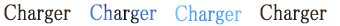
<style>
.page{position:relative;width:340px;height:26px;background:#ffffff}
.page>*{position:absolute;margin:0}
.t1{font:22.8px "MS-PMincho";color:#312017;font-weight:bold;scale:0.84 1}
.t2{font:22.8px "MS-PMincho";font-weight:bold;scale:0.84 1}
</style>
<div class="page">
<p class="t1" style="left:4px;top:3px;width:67px;height:21px">Charger</p>
<p class="t2" style="left:90px;top:3px;width:67px;height:21px">Charger</p>
<p class="t2" style="left:175px;top:4px;width:67px;height:21px">Charger</p>
<p class="t1" style="left:260px;top:3px;width:67px;height:21px">Charger</p>
</div>
